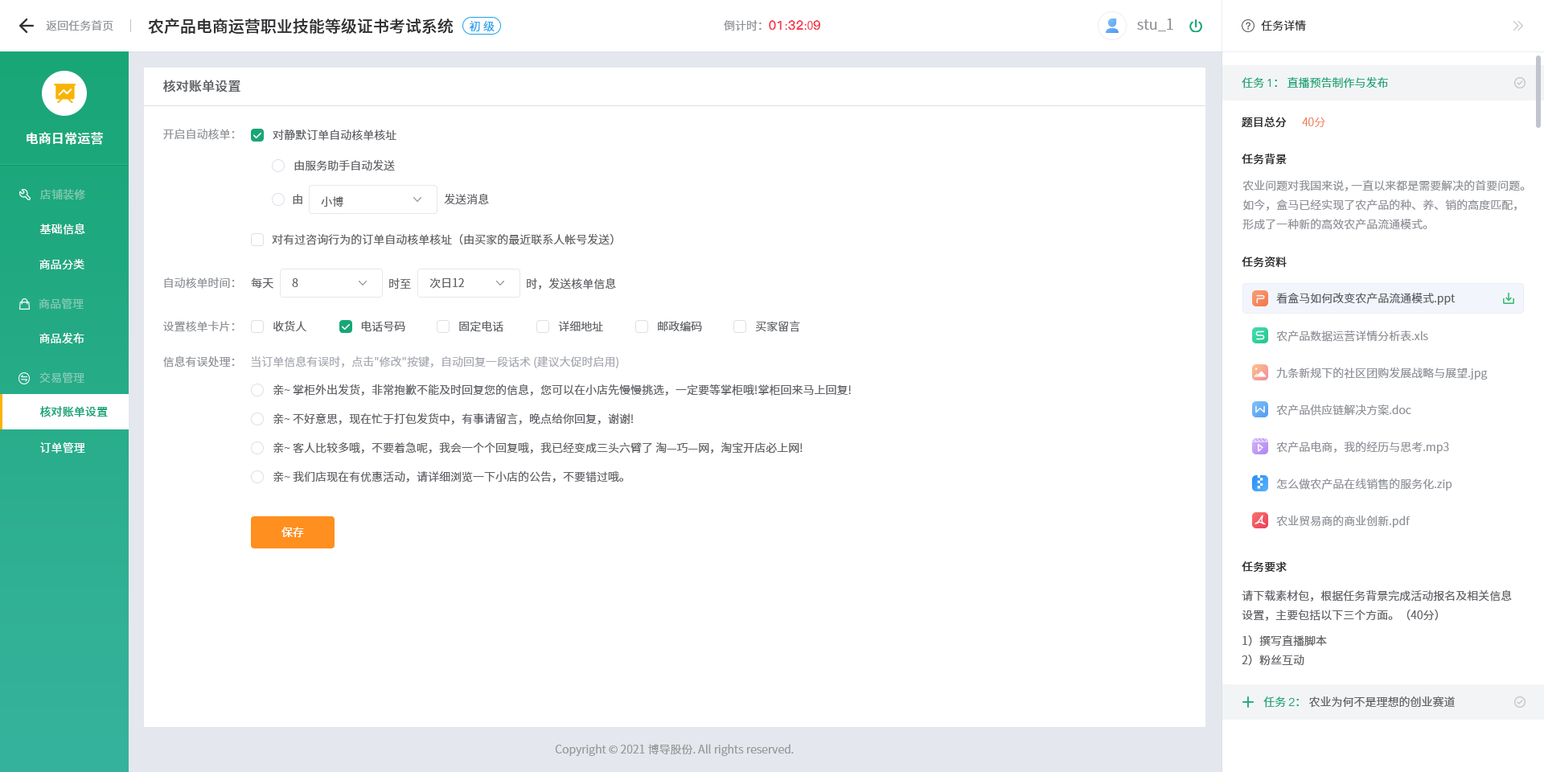
<style>
.page{position:relative;width:1544px;height:772px;background:#ffffff}
.page>*{position:absolute;margin:0}
.t1{font:16.1px "SourceHanSansCN-Medium";color:#303133}
.t2{font:11.3px "SourceHanSansCN-Normal";color:#909399}
.t3{font:11.3px "SourceHanSansCN-Normal";color:#1da0ea}
.t4{font:12.9px "PingFang-SC-Heavy";color:#f63f52}
.t5{font:11.3px "SourceHanSansCN-Normal";color:#f63f52}
.t6{font:14.5px "SourceHanSansCN-Normal";color:#909399}
.t7{font:11.3px "SourceHanSansCN-Normal";color:#303133}
.t8{font:11.3px "SourceHanSansCN-Normal";color:#19a677}
.t9{font:11.3px "PingFang-SC-Medium";color:#19a677}
.t10{font:12.9px "SourceHanSansCN-Medium";letter-spacing:0.01em;color:#606266}
.t11{font:11.3px "SourceHanSansCN-Medium";color:#303133}
.t12{font:11.3px "SourceHanSansCN-Light";color:#f67d53}
.t13{font:12.9px "SourceHanSansCN-Medium";letter-spacing:0.01em;color:#ffffff}
.t14{font:11.3px "SourceHanSansCN-Normal";color:#606266}
.t15{font:11.3px/19.3px "SourceHanSansCN-Normal";color:#909399}
.t16{font:11.3px "SourceHanSansCN-Regular";letter-spacing:0.01em;color:#81c9b0}
.t17{font:11.3px "SourceHanSansCN-Normal";letter-spacing:0.01em;color:#ffffff}
.t18{font:11.3px "SourceHanSansCN-Regular";letter-spacing:0.01em;color:#82cab3}
.t19{font:11.3px "SourceHanSansCN-Regular";letter-spacing:0.01em;color:#ffffff}
.t20{font:11.3px "SourceHanSansCN-Normal";color:#a8abb3}
.t21{font:11.3px "SourceHanSansCN-Regular";letter-spacing:0.01em;color:#83cbb6}
.t22{font:11.3px "SourceHanSansCN-Medium";letter-spacing:0.01em;color:#19a677}
.t23{font:11.3px "SourceHanSansCN-Normal";color:#ffffff}
.t24{font:11.3px/19.3px "SourceHanSansCN-Normal";color:#606266}
.t25{font:11.3px "PingFang-SC-Medium";color:#1aa678}
.t26{font:11.3px "SourceHanSansCN-Normal";color:#1aa678}
.t27{font:11.3px "SourceHanSansCN-Normal";color:#999999}
</style>
<div class="page">
<p class="t1" style="left:148px;top:18px;width:306px;height:16px">农产品电商运营职业技能等级证书考试系统</p>
<p class="t2" style="left:46px;top:20px;width:67px;height:11px">返回任务首页</p>
<p class="t3" style="left:469px;top:21px;width:26px;height:11px">初 级</p>
<p class="t2" style="left:724px;top:20px;width:96px;height:11px">倒计时：<span class="t4">01</span><span class="t5">:</span><span class="t4">32</span><span class="t5">:0</span><span class="t4">9</span></p>
<p class="t6" style="left:1137px;top:18px;width:37px;height:13px">stu_1</p>
<p class="t7" style="left:1261px;top:20px;width:45px;height:11px">任务详情</p>
<p class="t8" style="left:1242px;top:76px;width:146px;height:12px">任务 <span class="t9">1</span>： 直播预告制作与发布</p>
<p class="t10" style="left:163px;top:80px;width:77px;height:12px">核对账单设置</p>
<p class="t11" style="left:1242px;top:117px;width:45px;height:11px">题目总分</p>
<p class="t12" style="left:1302px;top:117px;width:24px;height:10px">40分</p>
<p class="t13" style="left:27px;top:132px;width:76px;height:13px">电商日常运营</p>
<p class="t2" style="left:163px;top:129px;width:72px;height:11px">开启自动核单：</p>
<p class="t14" style="left:273px;top:129px;width:124px;height:12px">对静默订单自动核单核址</p>
<p class="t14" style="left:294px;top:159px;width:101px;height:12px">由服务助手自动发送</p>
<p class="t11" style="left:1242px;top:153px;width:45px;height:12px">任务背景</p>
<p class="t15" style="left:1243px;top:180px;width:282px;height:50px">农业问题对我国来说，一直以来都是需要解决的首要问题。如今，盒马已经实现了农产品的种、养、销的高度匹配，形成了一种新的高效农产品流通模式。</p>
<p class="t16" style="left:40px;top:189px;width:45px;height:11px">店铺装修</p>
<p class="t14" style="left:293px;top:194px;width:9px;height:10px">由</p>
<p class="t14" style="left:321px;top:196px;width:22px;height:11px">小博</p>
<p class="t14" style="left:444px;top:193px;width:45px;height:12px">发送消息</p>
<p class="t17" style="left:40px;top:223px;width:45px;height:12px">基础信息</p>
<p class="t14" style="left:272px;top:233px;width:342px;height:12px">对有过咨询行为的订单自动核单核址（由买家的最近联系人帐号发送）</p>
<p class="t11" style="left:1242px;top:256px;width:45px;height:12px">任务资料</p>
<p class="t17" style="left:39px;top:259px;width:45px;height:10px">商品分类</p>
<p class="t2" style="left:164px;top:277px;width:71px;height:12px">自动核单时间：</p>
<p class="t14" style="left:251px;top:277px;width:22px;height:12px">每天</p>
<p class="t14" style="left:292px;top:278px;width:6px;height:9px">8</p>
<p class="t14" style="left:389px;top:278px;width:22px;height:11px">时至</p>
<p class="t14" style="left:430px;top:277px;width:34px;height:12px">次日12</p>
<p class="t14" style="left:527px;top:277px;width:89px;height:13px">时，发送核单信息</p>
<p class="t14" style="left:1276px;top:293px;width:180px;height:12px">看盒马如何改变农产品流通模式.ppt</p>
<p class="t18" style="left:39px;top:298px;width:45px;height:12px">商品管理</p>
<p class="t2" style="left:163px;top:321px;width:72px;height:11px">设置核单卡片：</p>
<p class="t14" style="left:273px;top:321px;width:33px;height:10px">收货人</p>
<p class="t14" style="left:361px;top:321px;width:44px;height:11px">电话号码</p>
<p class="t14" style="left:459px;top:321px;width:45px;height:11px">固定电话</p>
<p class="t14" style="left:558px;top:321px;width:45px;height:11px">详细地址</p>
<p class="t14" style="left:658px;top:321px;width:44px;height:10px">邮政编码</p>
<p class="t14" style="left:755px;top:321px;width:45px;height:11px">买家留言</p>
<p class="t19" style="left:39px;top:332px;width:45px;height:12px">商品发布</p>
<p class="t2" style="left:1276px;top:331px;width:152px;height:11px">农产品数据运营详情分析表.xls</p>
<p class="t2" style="left:163px;top:356px;width:72px;height:12px">信息有误处理：</p>
<p class="t20" style="left:251px;top:356px;width:368px;height:12px">当订单信息有误时，点击"修改"按键，自动回复一段话术 (建议大促时启用)</p>
<p class="t21" style="left:39px;top:372px;width:45px;height:12px">交易管理</p>
<p class="t2" style="left:1276px;top:367px;width:212px;height:13px">九条新规下的社区团购发展战略与展望.jpg</p>
<p class="t14" style="left:273px;top:384px;width:578px;height:12px">亲~ 掌柜外出发货，非常抱歉不能及时回复您的信息，您可以在小店先慢慢挑选，一定要等掌柜哦!掌柜回来马上回复!</p>
<p class="t22" style="left:39px;top:406px;width:69px;height:11px">核对账单设置</p>
<p class="t14" style="left:273px;top:413px;width:360px;height:12px">亲~ 不好意思，现在忙于打包发货中，有事请留言，晚点给你回复，谢谢!</p>
<p class="t2" style="left:1276px;top:405px;width:136px;height:11px">农产品供应链解决方案.doc</p>
<p class="t19" style="left:40px;top:442px;width:45px;height:12px">订单管理</p>
<p class="t14" style="left:273px;top:442px;width:530px;height:12px">亲~ 客人比较多哦，不要着急呢，我会一个个回复哦，我已经变成三头六臂了 淘—巧—网，淘宝开店必上网!</p>
<p class="t2" style="left:1276px;top:442px;width:173px;height:12px">农产品电商，我的经历与思考.mp3</p>
<p class="t14" style="left:273px;top:471px;width:350px;height:12px">亲~ 我们店现在有优惠活动，请详细浏览一下小店的公告，不要错过哦。</p>
<p class="t2" style="left:1277px;top:479px;width:176px;height:12px">怎么做农产品在线销售的服务化.zip</p>
<p class="t2" style="left:1276px;top:516px;width:135px;height:12px">农业贸易商的商业创新.pdf</p>
<p class="t23" style="left:282px;top:527px;width:22px;height:10px">保存</p>
<p class="t11" style="left:1242px;top:561px;width:45px;height:12px">任务要求</p>
<p class="t24" style="left:1242px;top:590px;width:270px;height:76px">请下载素材包，根据任务背景完成活动报名及相关信息设置，主要包括以下三个方面。（40分）<br>1）撰写直播脚本<br>2）粉丝互动</p>
<p class="t14" style="left:1264px;top:697px;width:191px;height:11px"><span class="t8">任务 </span><span class="t25">2</span><span class="t26">：</span> 农业为何不是理想的创业赛道</p>
<p class="t27" style="left:555px;top:744px;width:239px;height:12px">Copyright © 2021 博导股份. All rights reserved.</p>
</div>
